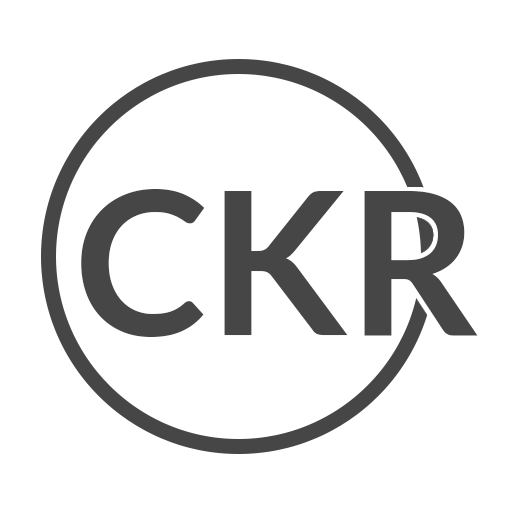
<style>
.page{position:relative;width:512px;height:512px;background:#ffffff}
.page>*{position:absolute;margin:0}
.t1{font:200px "Lato-Bold";color:#464646}
</style>
<div class="page">
<p class="t1" style="left:81px;top:189px;width:397px;height:148px">CKR</p>
</div>
